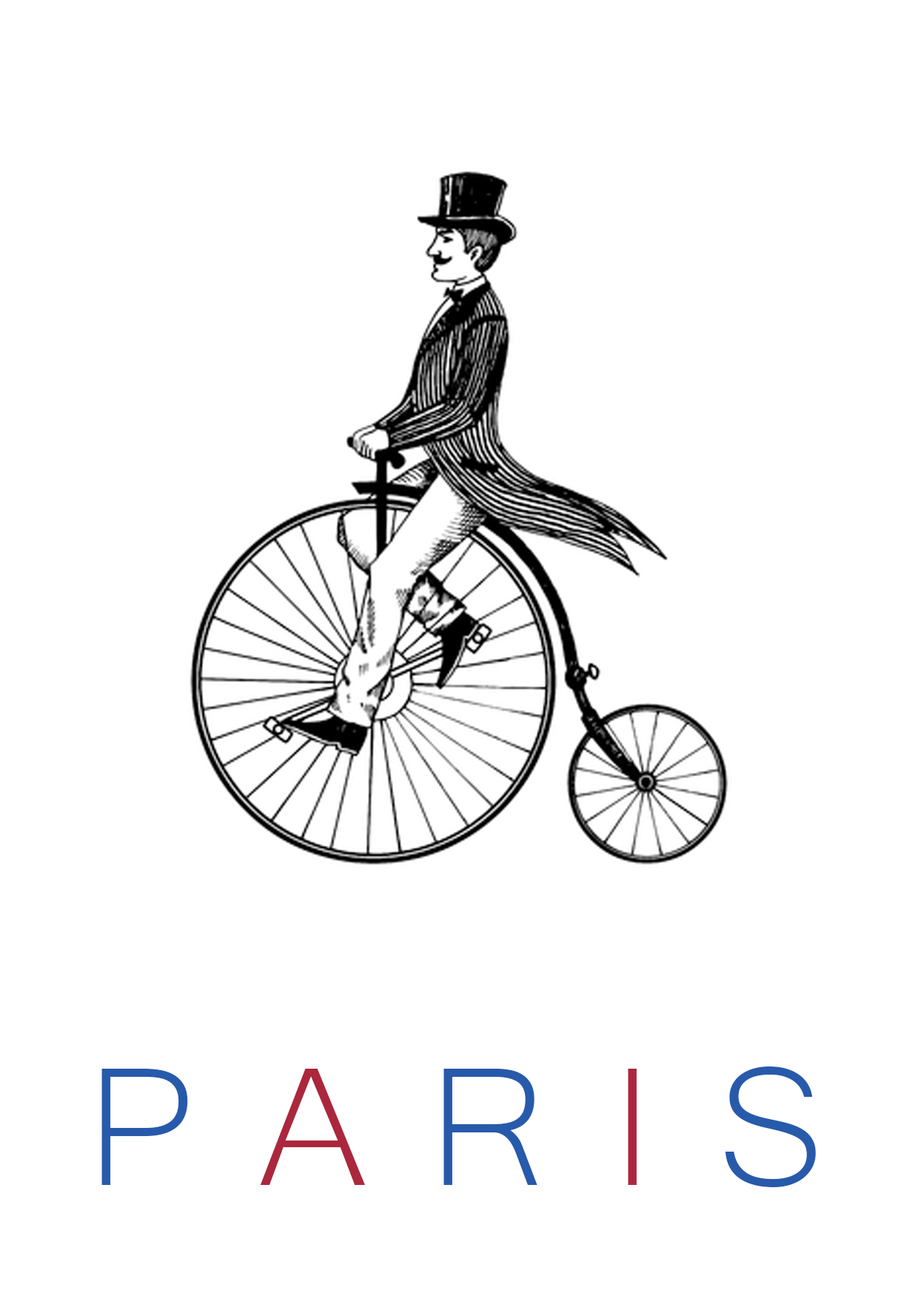
<style>
.page{position:relative;width:918px;height:1299px;background:#ffffff}
.page>*{position:absolute;margin:0}
.t1{font:217.5px "Microsoft-Yi-Baiti";letter-spacing:0.28em;color:#275aab}
.t2{font:217.5px "Microsoft-Yi-Baiti";letter-spacing:0.28em;color:#ab273d}
</style>
<div class="page">
<p class="t1" style="left:101px;top:1066px;width:715px;height:121px">P<span class="t2">A</span>R<span class="t2">I</span>S</p>
</div>
